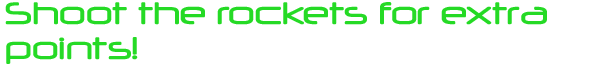
<style>
.page{position:relative;width:600px;height:67px;background:#ffffff}
.page>*{position:absolute;margin:0}
.t1{font:37px "Neuropol";color:#25da25}
</style>
<div class="page">
<p class="t1" style="left:5px;top:2px;width:542px;height:62px">Shoot the rockets for extra points!</p>
</div>
